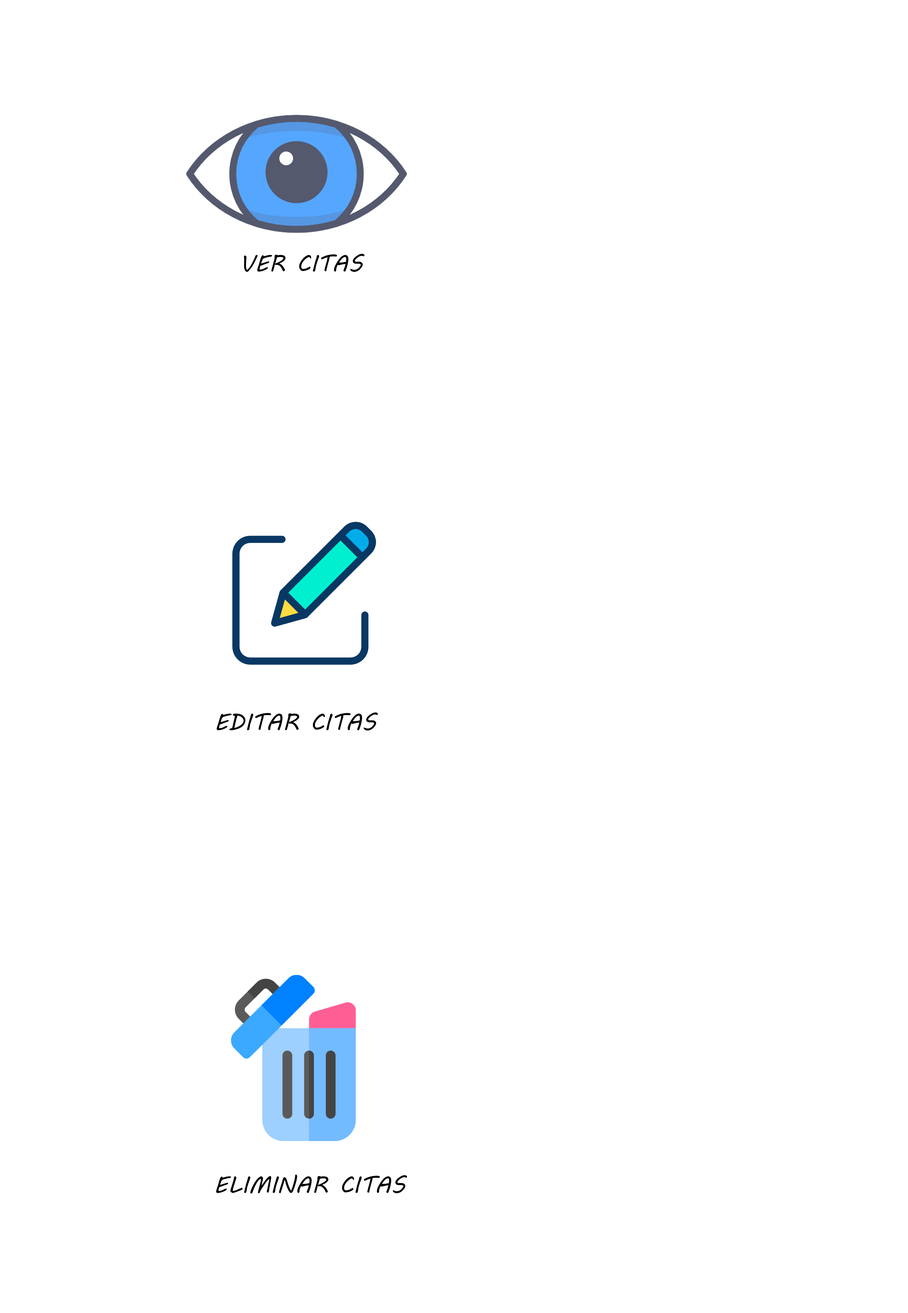
<style>
.page{position:relative;width:908px;height:1313px;background:#ffffff}
.page>*{position:absolute;margin:0}
.t1{font:23.3px "MVBoli";color:#020106;text-transform:uppercase}
</style>
<div class="page">
<p class="t1" style="left:244px;top:254px;width:121px;height:18px">Ver citas</p>
<p class="t1" style="left:217px;top:713px;width:161px;height:18px">Editar citas</p>
<p class="t1" style="left:216px;top:1175px;width:191px;height:19px">Eliminar citas</p>
</div>
